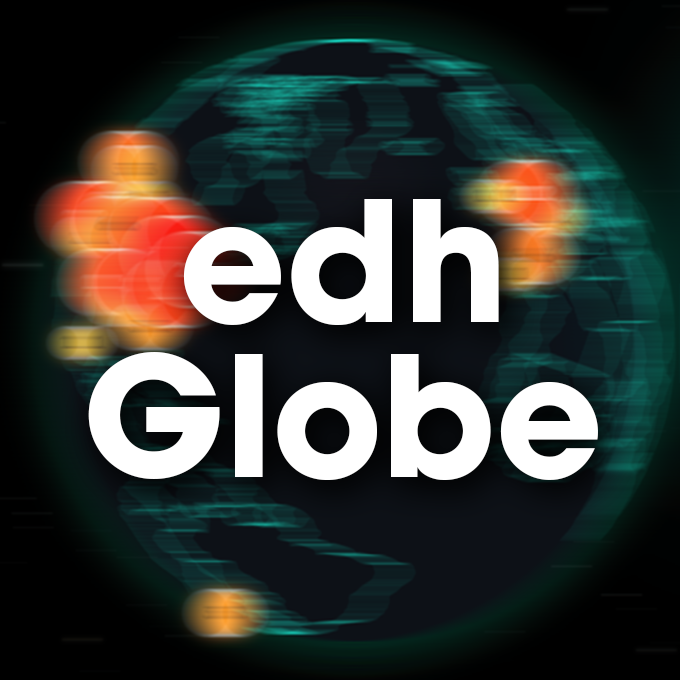
<style>
.page{position:relative;width:680px;height:680px}
.page>*{position:absolute;margin:0}
.t1{font:166px/155px "ITCAvantGardePro-Bold";color:#ffffff}
</style>
<div class="page">
<p class="t1" style="left:88px;top:199px;width:510px;height:281px;text-align:center">edh<br>Globe</p>
</div>
